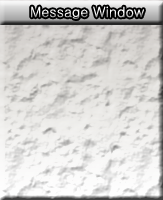
<style>
.page{position:relative;width:163px;height:200px}
.page>*{position:absolute;margin:0}
.t1{font:14px "Gulim"}
</style>
<div class="page">
<p class="t1" style="left:31px;top:6px;width:113px;height:13px">Message Window</p>
</div>
